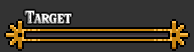
<style>
.page{position:relative;width:194px;height:52px;background:#333333}
.page>*{position:absolute;margin:0}
.t1{font:15px "HyliaSerifBeta-Regular";color:#ffffff}
</style>
<div class="page">
<p class="t1" style="left:25px;top:11px;width:47px;height:13px">Target</p>
</div>
